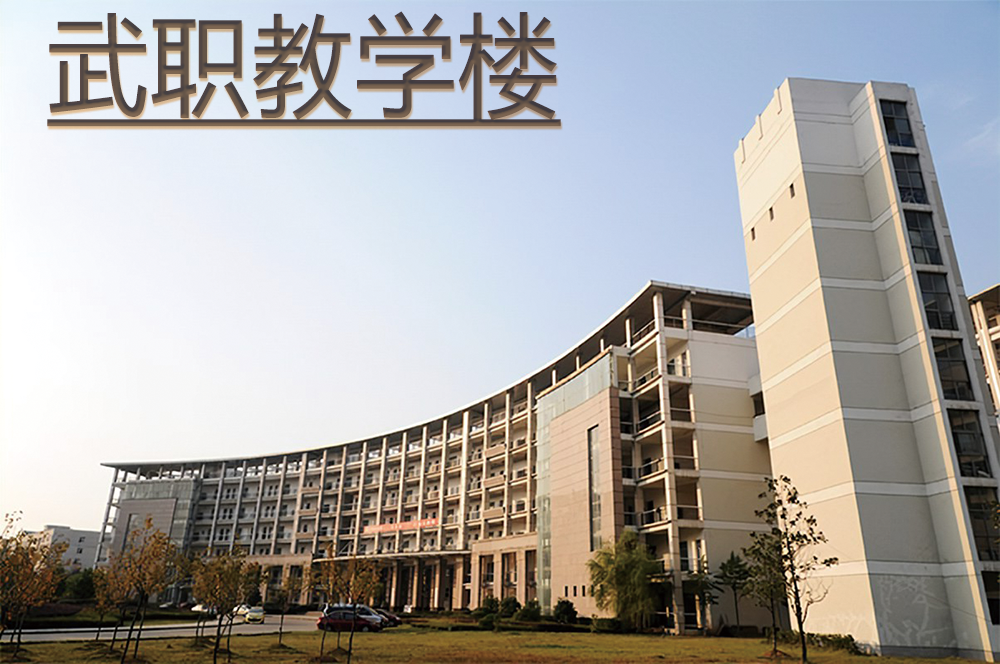
<style>
.page{position:relative;width:1000px;height:664px}
.page>*{position:absolute;margin:0}
.t1{font:110px "MicrosoftYaHei";font-weight:bold;text-decoration:underline;scale:0.91 1}
</style>
<div class="page">
<p class="t1" style="left:47px;top:11px;width:514px;height:116px">武职教学楼</p>
</div>
